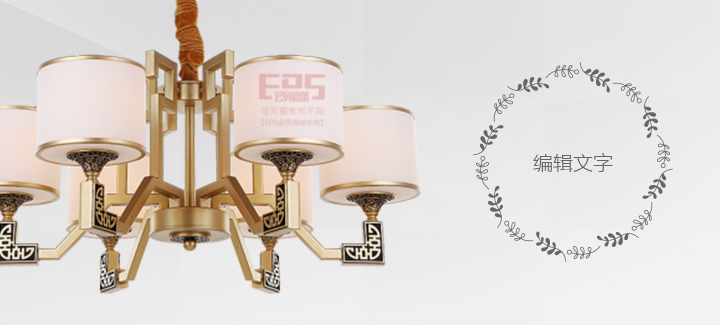
<style>
.page{position:relative;width:720px;height:325px}
.page>*{position:absolute;margin:0}
.t1{font:20px "MicrosoftYaHeiLight";color:#666666}
</style>
<div class="page">
<p class="t1" style="left:533px;top:153px;width:80px;height:19px">编辑文字</p>
</div>
